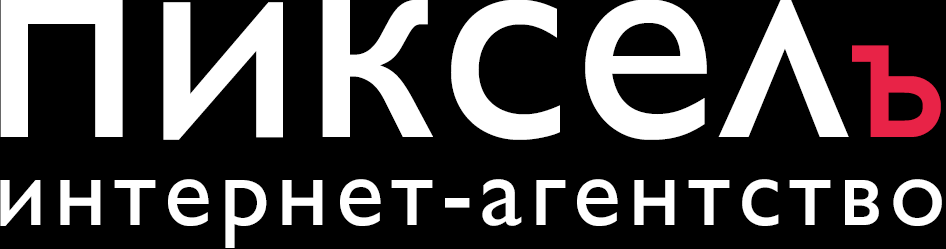
<style>
.page{position:relative;width:946px;height:249px;background:#000000}
.page>*{position:absolute;margin:0}
.t1{font:300px "GillSans";letter-spacing:0.007em;color:#ffffff}
.t2{font:306px "GillSans";letter-spacing:0.007em;color:#ffffff}
.t3{font:204px "GillSans";letter-spacing:0.007em;color:#e82347}
.t4{font:100px "GillSans";letter-spacing:0.068em;color:#ffffff}
</style>
<div class="page">
<p class="t1" style="left:0px;top:0px;width:941px;height:140px"><span class="t2">п</span>и<span class="t2">к</span>сел<span class="t3">ъ</span></p>
<p class="t4" style="left:0px;top:179px;width:942px;height:69px">интернет-агентство</p>
</div>
